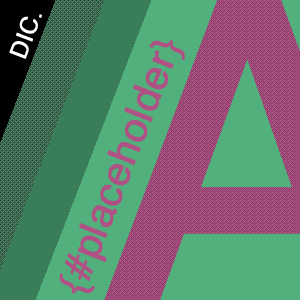
<style>
.page{position:relative;width:300px;height:300px;background:#52b07d}
.page>*{position:absolute;margin:0}
.t1{font:24px "Helvetica";color:#ffffff;font-weight:bold}
.t2{font:40px "Helvetica";color:#b05185;font-weight:bold}
</style>
<div class="page">
<p class="t1" style="left:9px;top:14px;width:33px;height:45px;rotate:-69deg">DIC.</p>
<p class="t2" style="left:59px;top:40px;width:126px;height:254px;rotate:-69deg">{#placeholder}</p>
</div>
